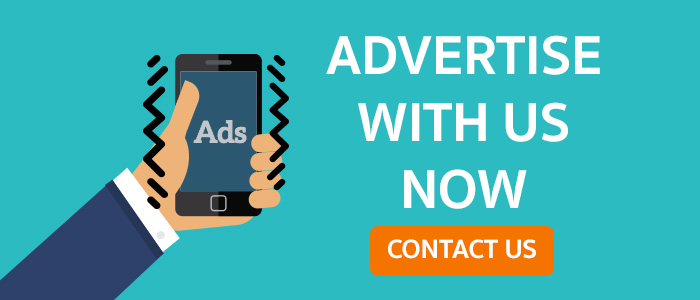
<style>
.page{position:relative;width:700px;height:300px;background:#2cbbc1}
.page>*{position:absolute;margin:0}
.t1{font:56px "SukhumvitSet-Bold";color:#ffffff}
.t2{font:27px "SukhumvitSet-Bold";color:#ffffff}
</style>
<div class="page">
<p class="t1" style="left:326px;top:35px;width:274px;height:174px;text-align:center">ADVERTISE<br>WITH US<br>NOW</p>
<p class="t2" style="left:388px;top:239px;width:148px;height:20px">CONTACT US</p>
</div>
